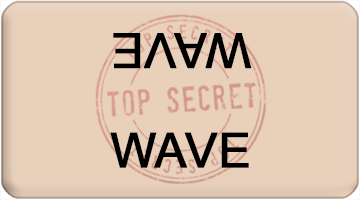
<style>
.page{position:relative;width:360px;height:200px;background:#e8d0bb}
.page>*{position:absolute;margin:0}
.t1{font:48px "ArialMT";color:#000000;font-weight:bold}
</style>
<div class="page">
<p class="t1" style="left:113px;top:33px;width:139px;height:36px;rotate:180deg">WAVE</p>
<p class="t1" style="left:110px;top:132px;width:139px;height:36px">WAVE</p>
</div>
